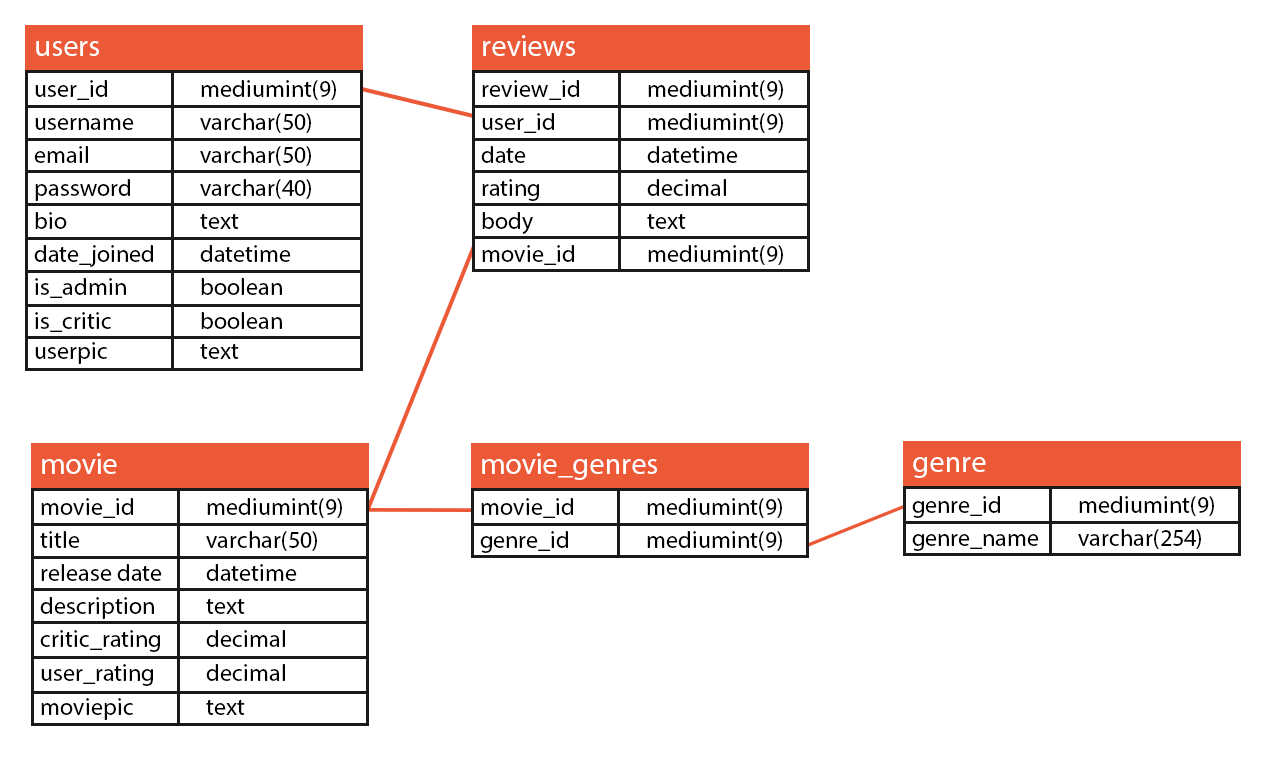
<style>
.page{position:relative;width:1280px;height:768px;background:#ffffff}
.page>*{position:absolute;margin:0}
.t1{font:30px "MyriadPro-Regular";color:#ffffff}
.t2{font:24px "MyriadPro-Regular";color:#000000}
</style>
<div class="page">
<p class="t1" style="left:36px;top:41px;width:63px;height:15px">users</p>
<p class="t1" style="left:483px;top:35px;width:92px;height:21px">reviews</p>
<p class="t2" style="left:35px;top:80px;width:72px;height:20px">user_id</p>
<p class="t2" style="left:201px;top:80px;width:135px;height:20px">mediumint(9)</p>
<p class="t2" style="left:482px;top:80px;width:97px;height:20px">review_id</p>
<p class="t2" style="left:648px;top:80px;width:135px;height:20px">mediumint(9)</p>
<p class="t2" style="left:200px;top:113px;width:111px;height:20px">varchar(50)</p>
<p class="t2" style="left:482px;top:113px;width:72px;height:20px">user_id</p>
<p class="t2" style="left:648px;top:113px;width:135px;height:20px">mediumint(9)</p>
<p class="t2" style="left:35px;top:118px;width:99px;height:12px">username</p>
<p class="t2" style="left:34px;top:146px;width:54px;height:17px">email</p>
<p class="t2" style="left:200px;top:146px;width:111px;height:20px">varchar(50)</p>
<p class="t2" style="left:481px;top:146px;width:45px;height:17px">date</p>
<p class="t2" style="left:647px;top:146px;width:91px;height:17px">datetime</p>
<p class="t2" style="left:35px;top:179px;width:95px;height:22px">password</p>
<p class="t2" style="left:200px;top:179px;width:111px;height:20px">varchar(40)</p>
<p class="t2" style="left:482px;top:179px;width:57px;height:22px">rating</p>
<p class="t2" style="left:647px;top:179px;width:79px;height:17px">decimal</p>
<p class="t2" style="left:35px;top:212px;width:32px;height:17px">bio</p>
<p class="t2" style="left:200px;top:213px;width:39px;height:16px">text</p>
<p class="t2" style="left:482px;top:212px;width:51px;height:22px">body</p>
<p class="t2" style="left:647px;top:213px;width:39px;height:16px">text</p>
<p class="t2" style="left:34px;top:245px;width:119px;height:22px">date_joined</p>
<p class="t2" style="left:200px;top:245px;width:91px;height:17px">datetime</p>
<p class="t2" style="left:482px;top:245px;width:92px;height:20px">movie_id</p>
<p class="t2" style="left:648px;top:245px;width:135px;height:20px">mediumint(9)</p>
<p class="t2" style="left:35px;top:278px;width:91px;height:20px">is_admin</p>
<p class="t2" style="left:201px;top:278px;width:81px;height:17px">boolean</p>
<p class="t2" style="left:35px;top:312px;width:76px;height:20px">is_critic</p>
<p class="t2" style="left:201px;top:312px;width:81px;height:17px">boolean</p>
<p class="t2" style="left:35px;top:342px;width:72px;height:22px">userpic</p>
<p class="t2" style="left:200px;top:343px;width:39px;height:16px">text</p>
<p class="t1" style="left:42px;top:453px;width:75px;height:21px">movie</p>
<p class="t1" style="left:482px;top:453px;width:175px;height:27px">movie_genres</p>
<p class="t1" style="left:913px;top:457px;width:73px;height:21px">genre</p>
<p class="t2" style="left:912px;top:496px;width:88px;height:22px">genre_id</p>
<p class="t2" style="left:1079px;top:496px;width:135px;height:20px">mediumint(9)</p>
<p class="t2" style="left:41px;top:498px;width:92px;height:20px">movie_id</p>
<p class="t2" style="left:207px;top:498px;width:135px;height:20px">mediumint(9)</p>
<p class="t2" style="left:481px;top:498px;width:92px;height:20px">movie_id</p>
<p class="t2" style="left:647px;top:498px;width:135px;height:20px">mediumint(9)</p>
<p class="t2" style="left:40px;top:531px;width:40px;height:17px">title</p>
<p class="t2" style="left:206px;top:531px;width:111px;height:20px">varchar(50)</p>
<p class="t2" style="left:480px;top:531px;width:88px;height:22px">genre_id</p>
<p class="t2" style="left:647px;top:531px;width:135px;height:20px">mediumint(9)</p>
<p class="t2" style="left:912px;top:534px;width:127px;height:17px">genre_name</p>
<p class="t2" style="left:1078px;top:529px;width:123px;height:20px">varchar(254)</p>
<p class="t2" style="left:41px;top:564px;width:121px;height:17px">release date</p>
<p class="t2" style="left:206px;top:564px;width:91px;height:17px">datetime</p>
<p class="t2" style="left:40px;top:597px;width:114px;height:22px">description</p>
<p class="t2" style="left:206px;top:598px;width:39px;height:16px">text</p>
<p class="t2" style="left:40px;top:630px;width:120px;height:22px">critic_rating</p>
<p class="t2" style="left:206px;top:630px;width:79px;height:17px">decimal</p>
<p class="t2" style="left:41px;top:664px;width:112px;height:22px">user_rating</p>
<p class="t2" style="left:206px;top:664px;width:79px;height:17px">decimal</p>
<p class="t2" style="left:41px;top:698px;width:92px;height:22px">moviepic</p>
<p class="t2" style="left:206px;top:699px;width:39px;height:16px">text</p>
</div>
